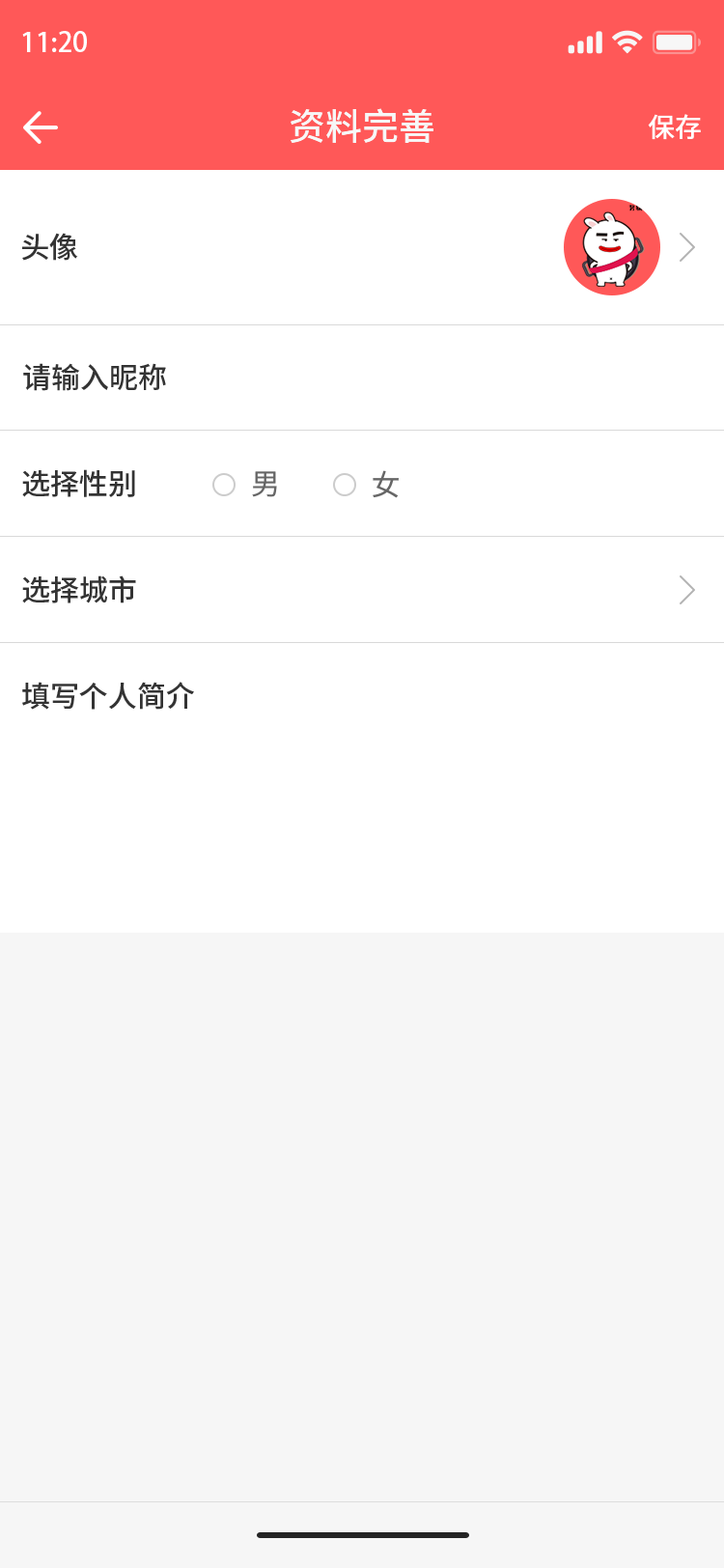
<style>
.page{position:relative;width:724px;height:1568px;background:#ffffff}
.page>*{position:absolute;margin:0}
.t1{font:27px "AdobeHeitiStd-Regular";color:#fefefe}
.t2{font:36.7px "SourceHanSansCN-Medium";color:#f7f7f7;text-transform:uppercase}
.t3{font:27px "SourceHanSansCN-Medium";color:#ffffff;text-transform:uppercase}
.t4{font:29px "SourceHanSansCN-Medium";color:#333333}
.t5{font:29px "SourceHanSansCN-Regular";color:#666666}
</style>
<div class="page">
<p class="t1" style="left:22px;top:31px;width:65px;height:21px">11:20</p>
<p class="t2" style="left:291px;top:108px;width:143px;height:35px">资料完善</p>
<p class="t3" style="left:648px;top:114px;width:53px;height:26px">保存</p>
<p class="t4" style="left:22px;top:233px;width:56px;height:28px">头像</p>
<p class="t4" style="left:23px;top:363px;width:143px;height:28px">请输入昵称</p>
<p class="t4" style="left:22px;top:469px;width:113px;height:28px">选择性别</p>
<p class="t5" style="left:252px;top:471px;width:25px;height:26px">男</p>
<p class="t5" style="left:373px;top:470px;width:26px;height:28px">女</p>
<p class="t4" style="left:22px;top:575px;width:114px;height:28px">选择城市</p>
<p class="t4" style="left:22px;top:682px;width:172px;height:28px">填写个人简介</p>
</div>
